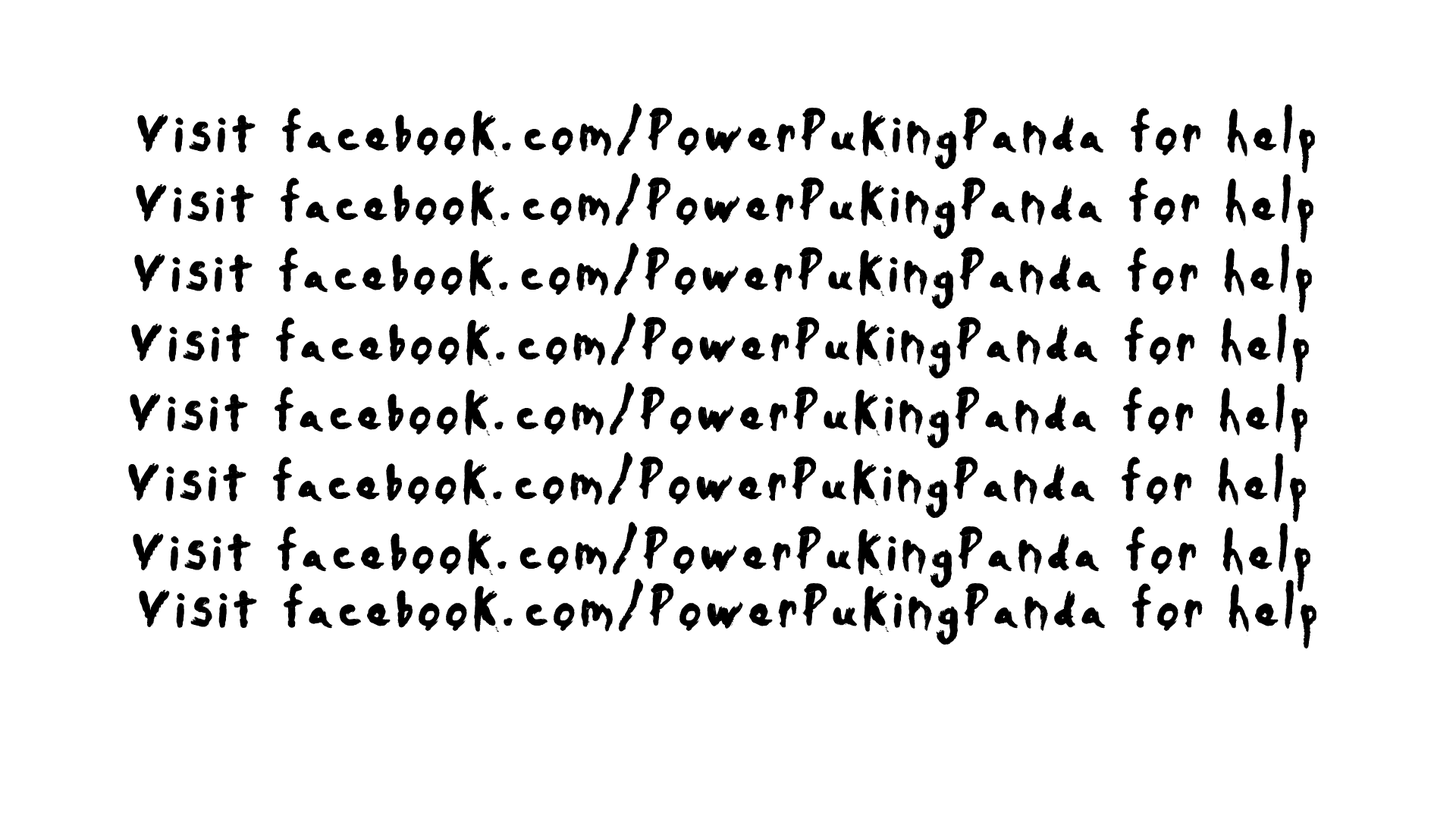
<style>
.page{position:relative;width:1456px;height:819px;background:#ffffff}
.page>*{position:absolute;margin:0}
.t1{font:80.5px "Daubmark";color:#000000}
</style>
<div class="page">
<p class="t1" style="left:137px;top:103px;width:1178px;height:71px">Visit facebook.com/PowerPukingPanda for help</p>
<p class="t1" style="left:136px;top:173px;width:1177px;height:70px">Visit facebook.com/PowerPukingPanda for help</p>
<p class="t1" style="left:134px;top:243px;width:1178px;height:70px">Visit facebook.com/PowerPukingPanda for help</p>
<p class="t1" style="left:131px;top:312px;width:1178px;height:71px">Visit facebook.com/PowerPukingPanda for help</p>
<p class="t1" style="left:130px;top:382px;width:1177px;height:71px">Visit facebook.com/PowerPukingPanda for help</p>
<p class="t1" style="left:128px;top:452px;width:1178px;height:70px">Visit facebook.com/PowerPukingPanda for help</p>
<p class="t1" style="left:133px;top:522px;width:1177px;height:70px">Visit facebook.com/PowerPukingPanda for help</p>
<p class="t1" style="left:139px;top:579px;width:1177px;height:70px">Visit facebook.com/PowerPukingPanda for help</p>
</div>
